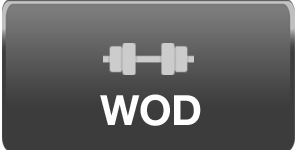
<style>
.page{position:relative;width:298px;height:150px;background:#3c3c3c}
.page>*{position:absolute;margin:0}
.t1{font:41.7px "HelveticaNeue-Bold";color:#fffefe}
</style>
<div class="page">
<p class="t1" style="left:100px;top:94px;width:101px;height:32px">WOD</p>
</div>
